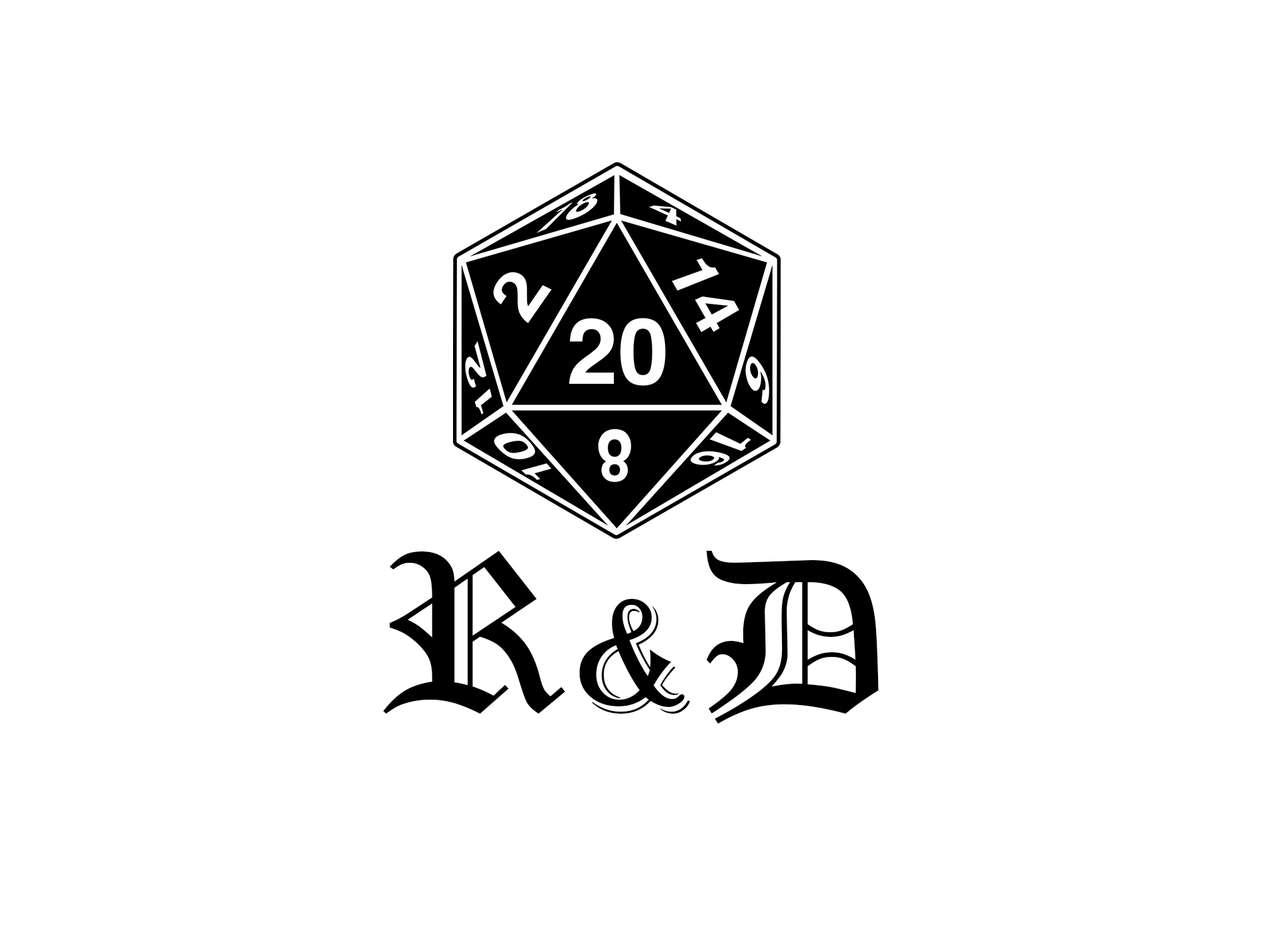
<style>
.page{position:relative;width:1261px;height:946px;background:#ffffff}
.page>*{position:absolute;margin:0}
.t1{font:224.1px "OldEnglishTextMT";color:#000000}
.t2{font:166.8px "Algerian";color:#000000}
</style>
<div class="page">
<p class="t1" style="left:383px;top:550px;width:496px;height:173px">R<span class="t2">&amp;</span>D</p>
</div>
